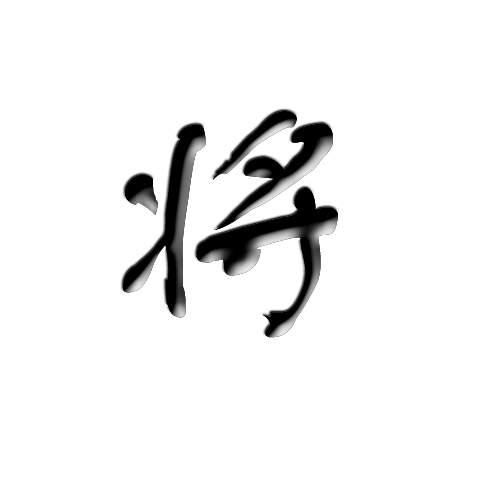
<style>
.page{position:relative;width:500px;height:500px;background:#ffffff}
.page>*{position:absolute;margin:0}
.t1{font:320px "FZSTK--GBK1-0"}
</style>
<div class="page">
<p class="t1" style="left:122px;top:110px;width:216px;height:228px">将</p>
</div>
